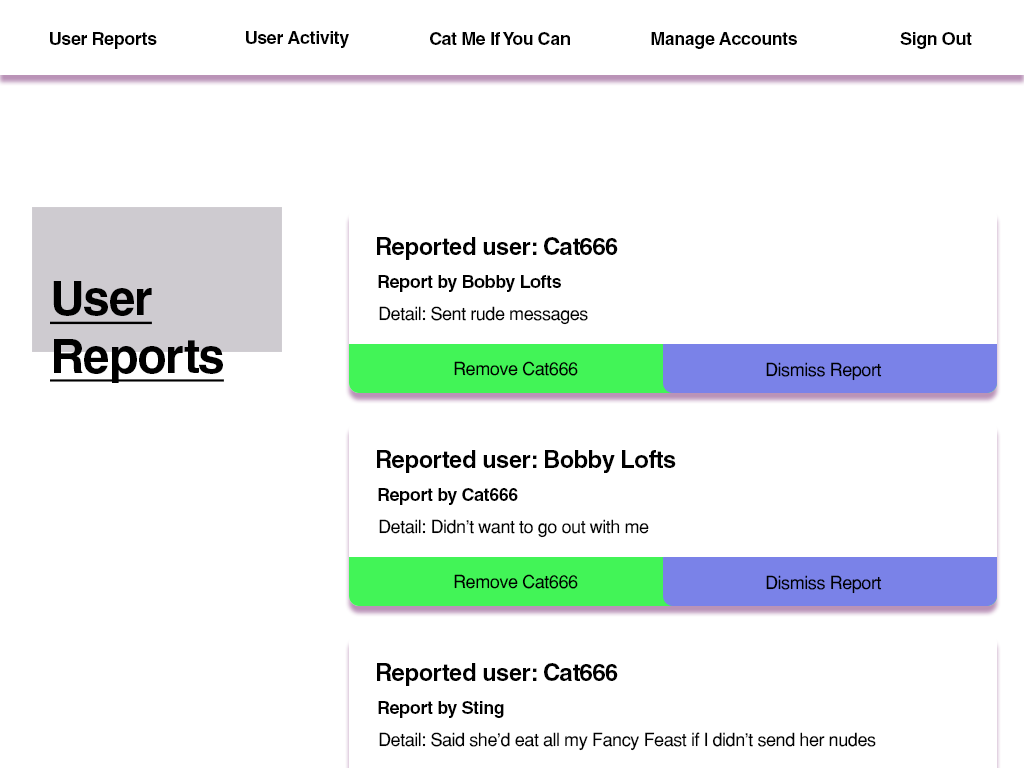
<style>
.page{position:relative;width:1024px;height:768px;background:#ffffff}
.page>*{position:absolute;margin:0}
.t1{font:18px "Helvetica-Bold";letter-spacing:-0.025em;color:#000000}
.t2{font:24px "Helvetica-Bold";letter-spacing:-0.025em;color:#000000}
.t3{font:48px "Helvetica-Bold";letter-spacing:-0.025em;color:#000000;text-decoration:underline}
.t4{font:18px "Helvetica-Normal";letter-spacing:-0.025em;color:#000000}
</style>
<div class="page">
<p class="t1" style="left:50px;top:32px;width:107px;height:17px">User Reports</p>
<p class="t1" style="left:246px;top:31px;width:103px;height:17px">User Activity</p>
<p class="t1" style="left:430px;top:32px;width:140px;height:13px">Cat Me If You Can</p>
<p class="t1" style="left:651px;top:32px;width:146px;height:17px">Manage Accounts</p>
<p class="t1" style="left:900px;top:32px;width:72px;height:17px">Sign Out</p>
<p class="t2" style="left:377px;top:237px;width:241px;height:23px">Reported user: Cat666</p>
<p class="t3" style="left:50px;top:281px;width:174px;height:102px">User<br>Reports</p>
<p class="t1" style="left:378px;top:275px;width:183px;height:17px">Report by Bobby Lofts</p>
<p class="t4" style="left:379px;top:306px;width:209px;height:19px">Detail: Sent rude messages</p>
<p class="t4" style="left:454px;top:361px;width:124px;height:15px">Remove Cat666</p>
<p class="t4" style="left:766px;top:362px;width:116px;height:19px">Dismiss Report</p>
<p class="t2" style="left:377px;top:450px;width:299px;height:23px">Reported user: Bobby Lofts</p>
<p class="t1" style="left:378px;top:488px;width:140px;height:17px">Report by Cat666</p>
<p class="t4" style="left:379px;top:519px;width:270px;height:19px">Detail: Didn’t want to go out with me</p>
<p class="t4" style="left:454px;top:574px;width:124px;height:15px">Remove Cat666</p>
<p class="t4" style="left:766px;top:575px;width:116px;height:19px">Dismiss Report</p>
<p class="t2" style="left:377px;top:663px;width:241px;height:23px">Reported user: Cat666</p>
<p class="t1" style="left:378px;top:701px;width:126px;height:17px">Report by Sting</p>
<p class="t4" style="left:379px;top:732px;width:497px;height:19px">Detail: Said she’d eat all my Fancy Feast if I didn’t send her nudes</p>
</div>
